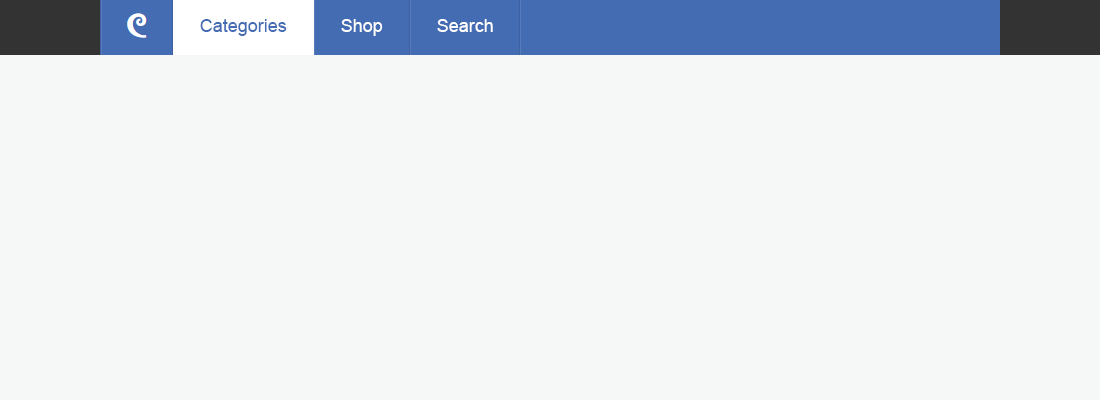
<style>
.page{position:relative;width:1100px;height:400px;background:#f6f8f8}
.page>*{position:absolute;margin:0}
.t1{font:18px "ArialMT";color:#446cb3}
.t2{font:18px "ArialMT";color:#ffffff}
</style>
<div class="page">
<p class="t1" style="left:200px;top:19px;width:87px;height:17px">Categories</p>
<p class="t1" style="left:200px;top:19px;width:87px;height:17px">Categories</p>
<p class="t2" style="left:341px;top:19px;width:42px;height:17px">Shop</p>
<p class="t2" style="left:437px;top:19px;width:56px;height:13px">Search</p>
</div>
